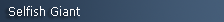
<style>
.page{position:relative;width:224px;height:22px}
.page>*{position:absolute;margin:0}
.t1{font:12.1px "Verdana";color:#ffffff;scale:0.91 1}
</style>
<div class="page">
<p class="t1" style="left:9px;top:6px;width:71px;height:10px">Selfish Giant</p>
</div>
